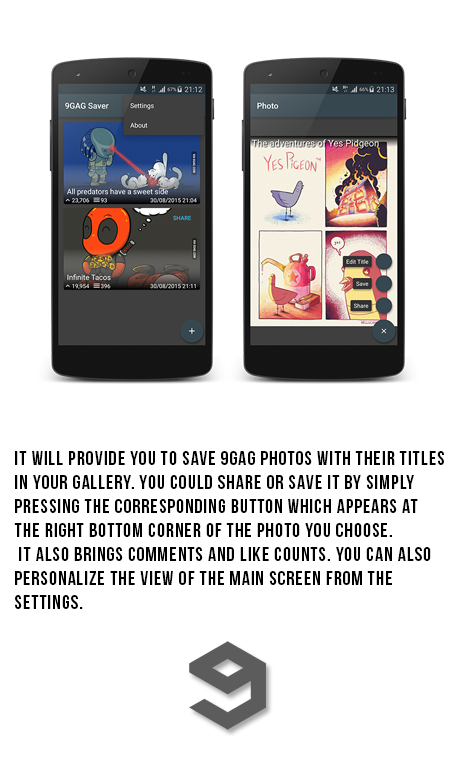
<style>
.page{position:relative;width:460px;height:778px;background:#ffffff}
.page>*{position:absolute;margin:0}
.t1{font:20px "BebasNeue";letter-spacing:0.05em;color:#000000}
</style>
<div class="page">
<p class="t1" style="left:14px;top:451px;width:430px;height:158px">It will provide you to save 9GAG photos with their titles <br>in your gallery. You could share or save it by simply <br>pressing the corresponding button which appears at <br>the right bottom corner of the photo you choose.<br> It also brings comments and like counts. You can also <br>personalize the view of the main screen from the <br>settings.</p>
</div>
